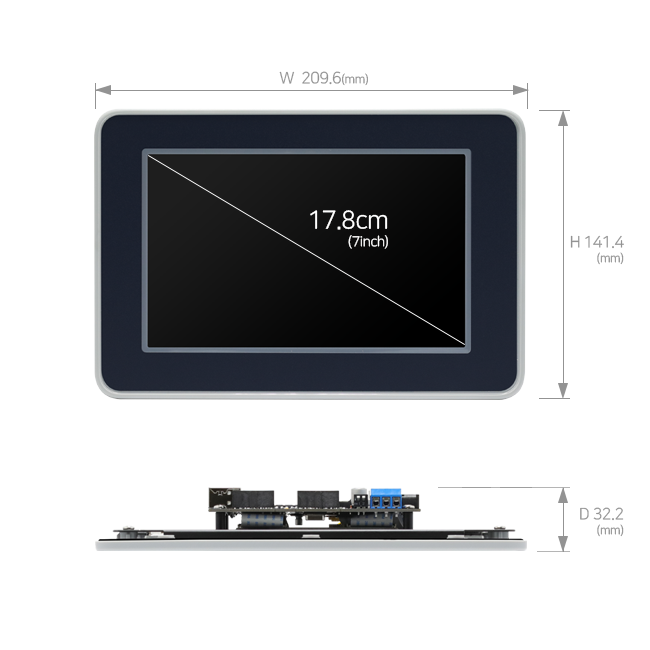
<style>
.page{position:relative;width:650px;height:650px;background:#ffffff}
.page>*{position:absolute;margin:0}
.t1{font:16px "NanumSquareR";letter-spacing:-0.03em;color:#939393}
.t2{font:12px "NanumSquareR";letter-spacing:-0.03em;color:#939393}
.t3{font:14px/18px "NanumSquareR";letter-spacing:-0.03em;color:#ffffff}
.t4{font:25px/18px "NanumSquareR";letter-spacing:-0.03em;color:#ffffff}
.t5{font:16px/15px "NanumSquareR";letter-spacing:-0.03em;color:#939393}
.t6{font:12px/15px "NanumSquareR";letter-spacing:-0.03em;color:#939393}
</style>
<div class="page">
<p class="t1" style="left:279px;top:71px;width:89px;height:15px">W  209.6<span class="t2">(mm)</span></p>
<p class="t3" style="left:310px;top:210px;width:78px;height:39px;text-align:right"><span class="t4">17.8cm<br></span>(7inch)</p>
<p class="t5" style="left:570px;top:235px;width:54px;height:30px;text-align:right">H 141.4<br><span class="t6">(mm)</span></p>
<p class="t5" style="left:580px;top:507px;width:44px;height:30px;text-align:right">D 32.2<br><span class="t6">(mm)</span></p>
</div>
